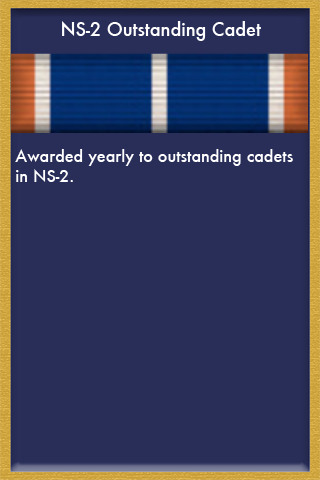
<style>
.page{position:relative;width:320px;height:480px;background:#292e59}
.page>*{position:absolute;margin:0}
.t1{font:18px "Futura-Medium";color:#ffffff}
.t2{font:16px "Futura-Medium";color:#ffffff}
</style>
<div class="page">
<p class="t1" style="left:62px;top:21px;width:199px;height:20px">NS-2 Outstanding Cadet</p>
<p class="t2" style="left:15px;top:149px;width:278px;height:33px">Awarded yearly to outstanding cadets <br>in NS-2.</p>
</div>
